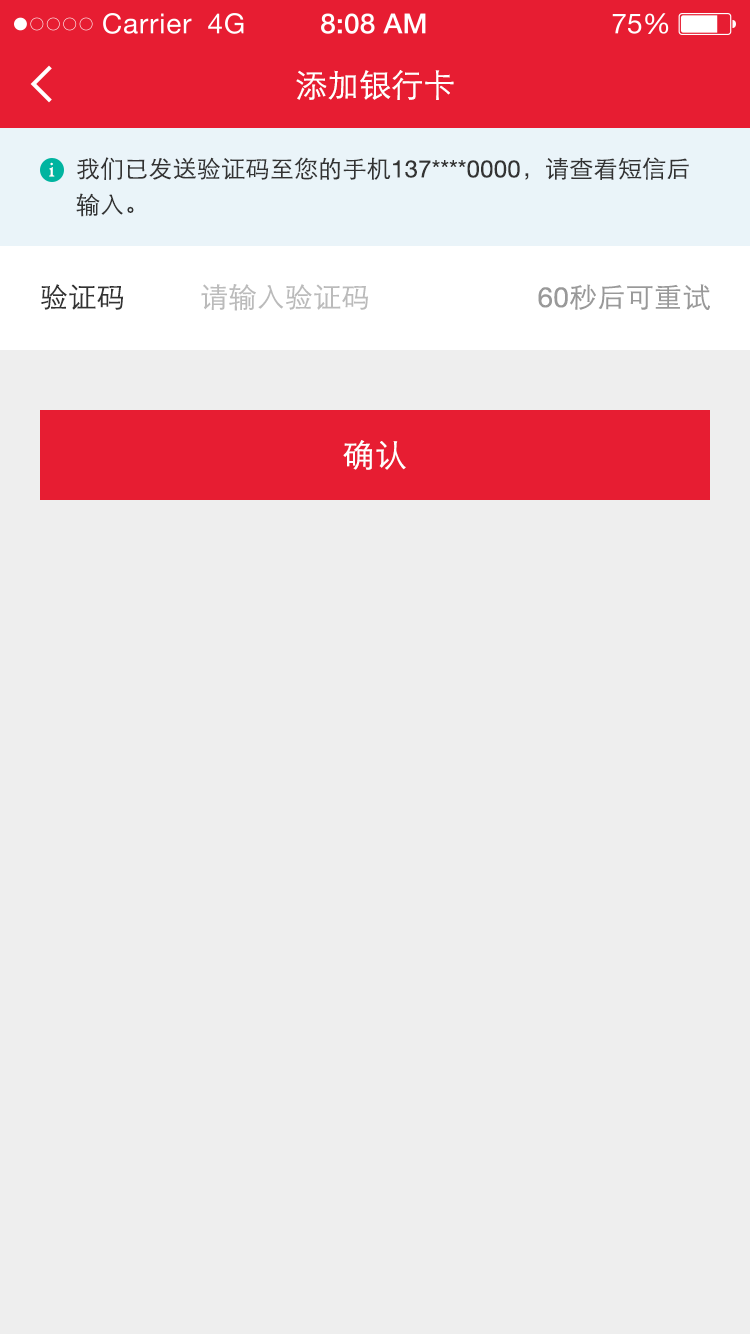
<style>
.page{position:relative;width:750px;height:1334px;background:#eeeeee}
.page>*{position:absolute;margin:0}
.t1{font:32px "STXihei";color:#ffffff}
.t2{font:24px/36px "STXihei";letter-spacing:0.01em;color:#333333}
.t3{font:24px/36px "HelveticaNeue";letter-spacing:0.01em;color:#333333}
.t4{font:20px "HoeflerText-Regular";color:#ffffff}
.t5{font:28px "STXihei";letter-spacing:0.01em;color:#333333}
.t6{font:28px "STXihei";letter-spacing:0.01em;color:#bbbbbb}
.t7{font:28px "STXihei";letter-spacing:0.01em;color:#999999}
.t8{font:28px "HelveticaNeue";letter-spacing:0.01em;color:#999999}
</style>
<div class="page">
<p class="t1" style="left:296px;top:70px;width:158px;height:30px">添加银行卡</p>
<p class="t2" style="left:76px;top:157px;width:613px;height:60px">我们已发送验证码至您的手机<span class="t3">137****0000</span>，请查看短信后输入。</p>
<p class="t4" style="left:49px;top:162px;width:6px;height:15px">i</p>
<p class="t5" style="left:41px;top:284px;width:83px;height:26px">验证码</p>
<p class="t6" style="left:201px;top:284px;width:167px;height:27px">请输入验证码</p>
<p class="t7" style="left:538px;top:284px;width:172px;height:26px"><span class="t8">60</span>秒后可重试</p>
<p class="t1" style="left:343px;top:440px;width:63px;height:30px">确认</p>
</div>
